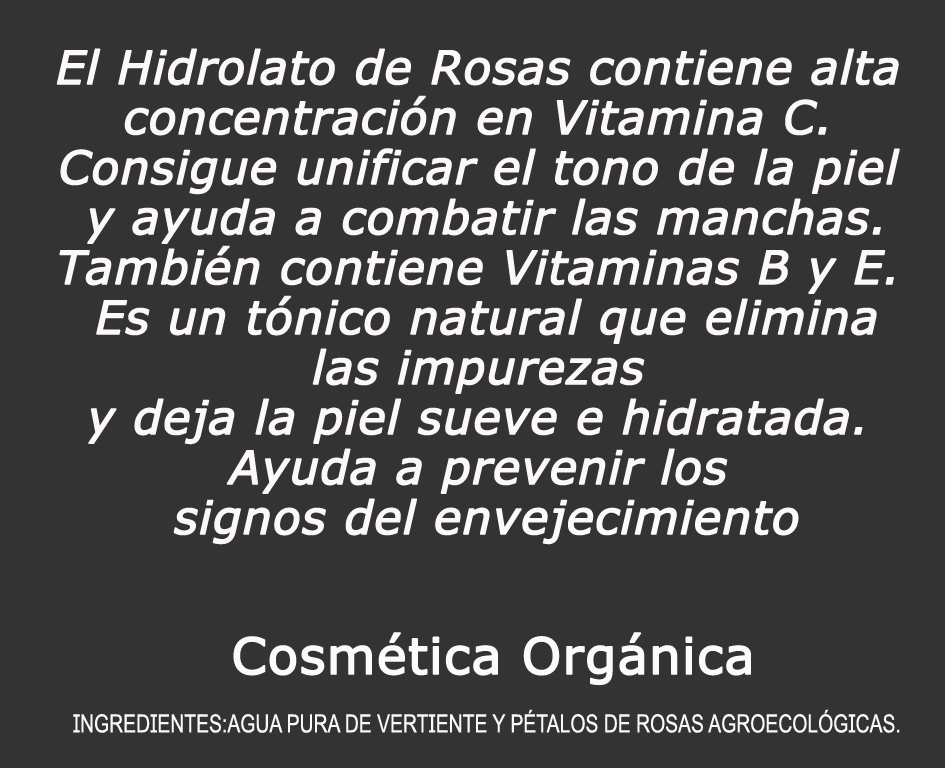
<style>
.page{position:relative;width:945px;height:768px;background:#333333}
.page>*{position:absolute;margin:0}
.t1{font:45.8px/50px "Verdana-Italic";color:#fdf8f8;font-weight:bold}
.t2{font:45.8px/50px "Verdana-Italic";color:#fcfafa;font-weight:bold}
.t3{font:50px "Verdana";color:#fcfafa;font-weight:bold}
.t4{font:25px "ArialMT";color:#faf8f8;scale:0.78 1}
</style>
<div class="page">
<p class="t1" style="left:56px;top:48px;width:844px;height:497px;text-align:center">El Hidrolato de Rosas contiene alta <br>concentración en Vitamina C. <br>Consigue unificar el tono de la piel <br>y ayuda a combatir las manchas.<br>También contiene Vitaminas B y E. <br> Es un tónico natural que elimina <br>las impurezas <br>y deja la piel sueve e hidratada. <br>Ayuda a prevenir los <br>signos del e<span class="t2">nvejecimiento</span></p>
<p class="t3" style="left:233px;top:632px;width:518px;height:54px">Cosmética Orgánica</p>
<p class="t4" style="left:73px;top:709px;width:827px;height:24px">INGREDIENTES:AGUA PURA DE VERTIENTE Y PÉTALOS DE ROSAS AGROECOLÓGICAS.</p>
</div>
